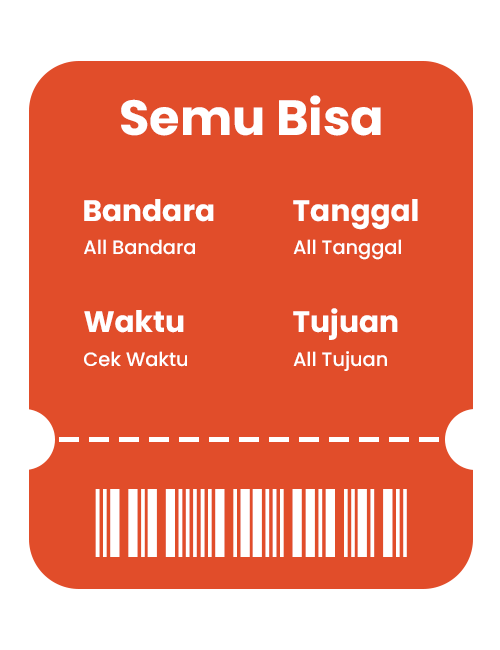
<style>
.page{position:relative;width:500px;height:650px;background:#e14d2a}
.page>*{position:absolute;margin:0}
.t1{font:49.4px "Poppins-Bold";color:#ffffff}
.t2{font:29.7px "Poppins-Bold";color:#ffffff}
.t3{font:19.3px "Poppins-Medium";color:#ffffff}
.t4{font:90.6px "3Of9Barcode";color:#ffffff}
</style>
<div class="page">
<p class="t1" style="left:121px;top:95px;width:260px;height:41px">Semu Bisa</p>
<p class="t2" style="left:84px;top:199px;width:130px;height:23px">Bandara</p>
<p class="t2" style="left:293px;top:199px;width:125px;height:31px">Tanggal</p>
<p class="t3" style="left:84px;top:239px;width:111px;height:16px">All Bandara</p>
<p class="t3" style="left:293px;top:239px;width:108px;height:21px">All Tanggal</p>
<p class="t2" style="left:84px;top:310px;width:100px;height:23px">Waktu</p>
<p class="t2" style="left:293px;top:308px;width:105px;height:32px">Tujuan</p>
<p class="t3" style="left:84px;top:351px;width:103px;height:16px">Cek Waktu</p>
<p class="t3" style="left:293px;top:351px;width:94px;height:20px">All Tujuan</p>
<p class="t4" style="left:95px;top:489px;width:312px;height:68px">jwdke5</p>
</div>
